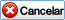
<style>
.page{position:relative;width:65px;height:20px;background:#ffffff}
.page>*{position:absolute;margin:0}
.t1{font:11.1px "ArialMT";color:#060808}
</style>
<div class="page">
<p class="t1" style="left:20px;top:6px;width:44px;height:9px">Cancelar</p>
</div>
